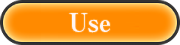
<style>
.page{position:relative;width:180px;height:45px;background:#ff8a00}
.page>*{position:absolute;margin:0}
.t1{font:25px "RyuminPro-ExBold";color:#fff6f3}
</style>
<div class="page">
<p class="t1" style="left:69px;top:13px;width:41px;height:20px">Use</p>
</div>
